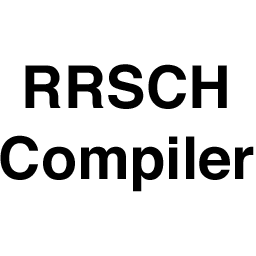
<style>
.page{position:relative;width:256px;height:256px;background:#ffffff}
.page>*{position:absolute;margin:0}
.t1{font:59px "Helvetica-Bold";color:#000000}
</style>
<div class="page">
<p class="t1" style="left:0px;top:64px;width:254px;height:128px;text-align:center">RRSCH<br>Compiler</p>
</div>
